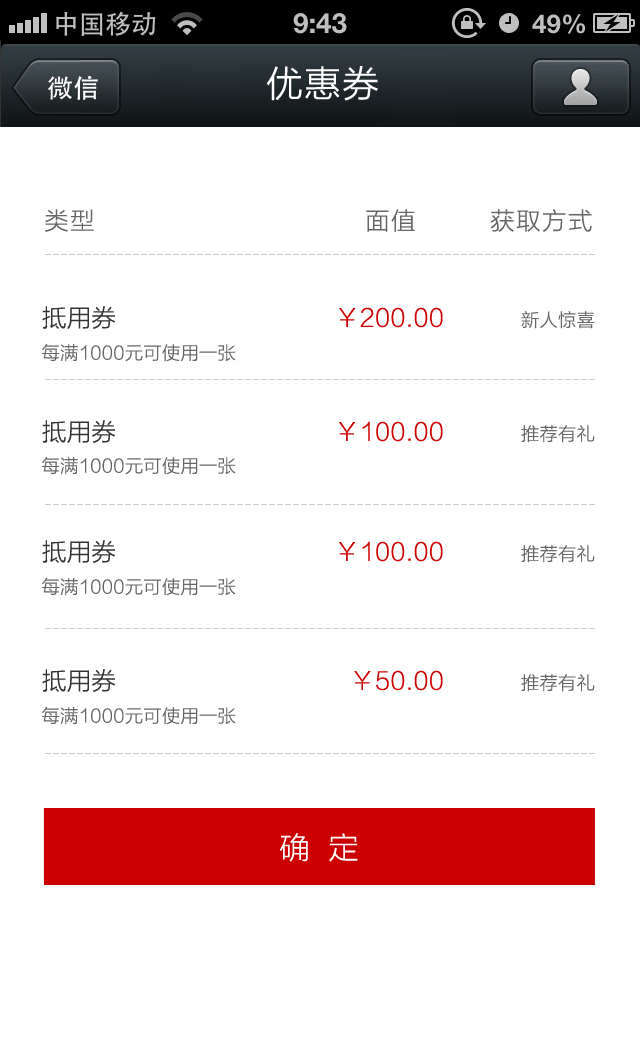
<style>
.page{position:relative;width:640px;height:1053px;background:#ffffff}
.page>*{position:absolute;margin:0}
.t1{font:36px "STHeitiSC-Medium";color:#ffffff;font-weight:bold}
.t2{font:24px "STHeitiSC-Medium";letter-spacing:0.05em;color:#666666}
.t3{font:18px "MicrosoftYaHei";color:#cccccc}
.t4{font:24px "STHeitiSC-Medium";color:#333333}
.t5{font:24px "STHeitiSC-Medium";color:#cc0000}
.t6{font:18px "STHeitiSC-Medium";color:#666666}
.t7{font:30px "STHeitiSC-Medium";color:#ffffff}
</style>
<div class="page">
<p class="t1" style="left:267px;top:66px;width:111px;height:35px">优惠券</p>
<p class="t2" style="left:45px;top:209px;width:49px;height:23px">类型</p>
<p class="t2" style="left:366px;top:209px;width:49px;height:23px">面值</p>
<p class="t2" style="left:490px;top:209px;width:102px;height:23px">获取方式</p>
<p class="t3" style="left:45px;top:254px;width:550px;height:1px">---------------------------------------------------------------------</p>
<p class="t4" style="left:42px;top:306px;width:73px;height:23px">抵用券</p>
<p class="t5" style="left:339px;top:307px;width:104px;height:21px">￥200.00</p>
<p class="t6" style="left:521px;top:311px;width:74px;height:18px">新人惊喜</p>
<p class="t6" style="left:42px;top:344px;width:194px;height:18px">每满1000元可使用一张</p>
<p class="t3" style="left:45px;top:379px;width:550px;height:1px">---------------------------------------------------------------------</p>
<p class="t4" style="left:42px;top:420px;width:73px;height:23px">抵用券</p>
<p class="t5" style="left:339px;top:421px;width:104px;height:21px">￥100.00</p>
<p class="t6" style="left:521px;top:425px;width:74px;height:18px">推荐有礼</p>
<p class="t6" style="left:42px;top:457px;width:194px;height:18px">每满1000元可使用一张</p>
<p class="t3" style="left:45px;top:504px;width:550px;height:1px">---------------------------------------------------------------------</p>
<p class="t4" style="left:42px;top:540px;width:73px;height:23px">抵用券</p>
<p class="t5" style="left:339px;top:541px;width:104px;height:21px">￥100.00</p>
<p class="t6" style="left:521px;top:545px;width:74px;height:18px">推荐有礼</p>
<p class="t6" style="left:42px;top:578px;width:194px;height:18px">每满1000元可使用一张</p>
<p class="t3" style="left:45px;top:628px;width:550px;height:1px">---------------------------------------------------------------------</p>
<p class="t4" style="left:42px;top:669px;width:73px;height:23px">抵用券</p>
<p class="t5" style="left:354px;top:670px;width:89px;height:21px">￥50.00</p>
<p class="t6" style="left:521px;top:674px;width:74px;height:18px">推荐有礼</p>
<p class="t6" style="left:42px;top:707px;width:194px;height:18px">每满1000元可使用一张</p>
<p class="t3" style="left:45px;top:753px;width:550px;height:1px">---------------------------------------------------------------------</p>
<p class="t7" style="left:280px;top:833px;width:78px;height:29px">确  定</p>
</div>
